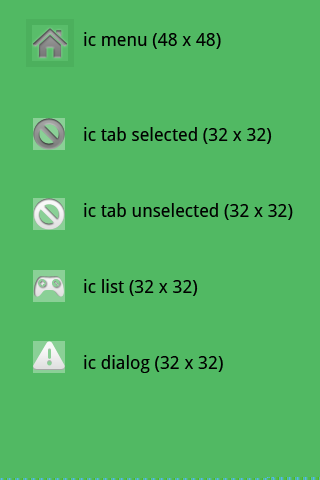
<style>
.page{position:relative;width:320px;height:480px;background:#51b963}
.page>*{position:absolute;margin:0}
.t1{font:18px/19px "DroidSans";color:#000000}
</style>
<div class="page">
<p class="t1" style="left:84px;top:32px;width:209px;height:341px">ic menu (48 x 48)<br><br><br><br><br>ic tab selected (32 x 32)<br><br><br><br>ic tab unselected (32 x 32)<br><br><br><br>ic list (32 x 32)<br><br><br><br>ic dialog (32 x 32)</p>
</div>
